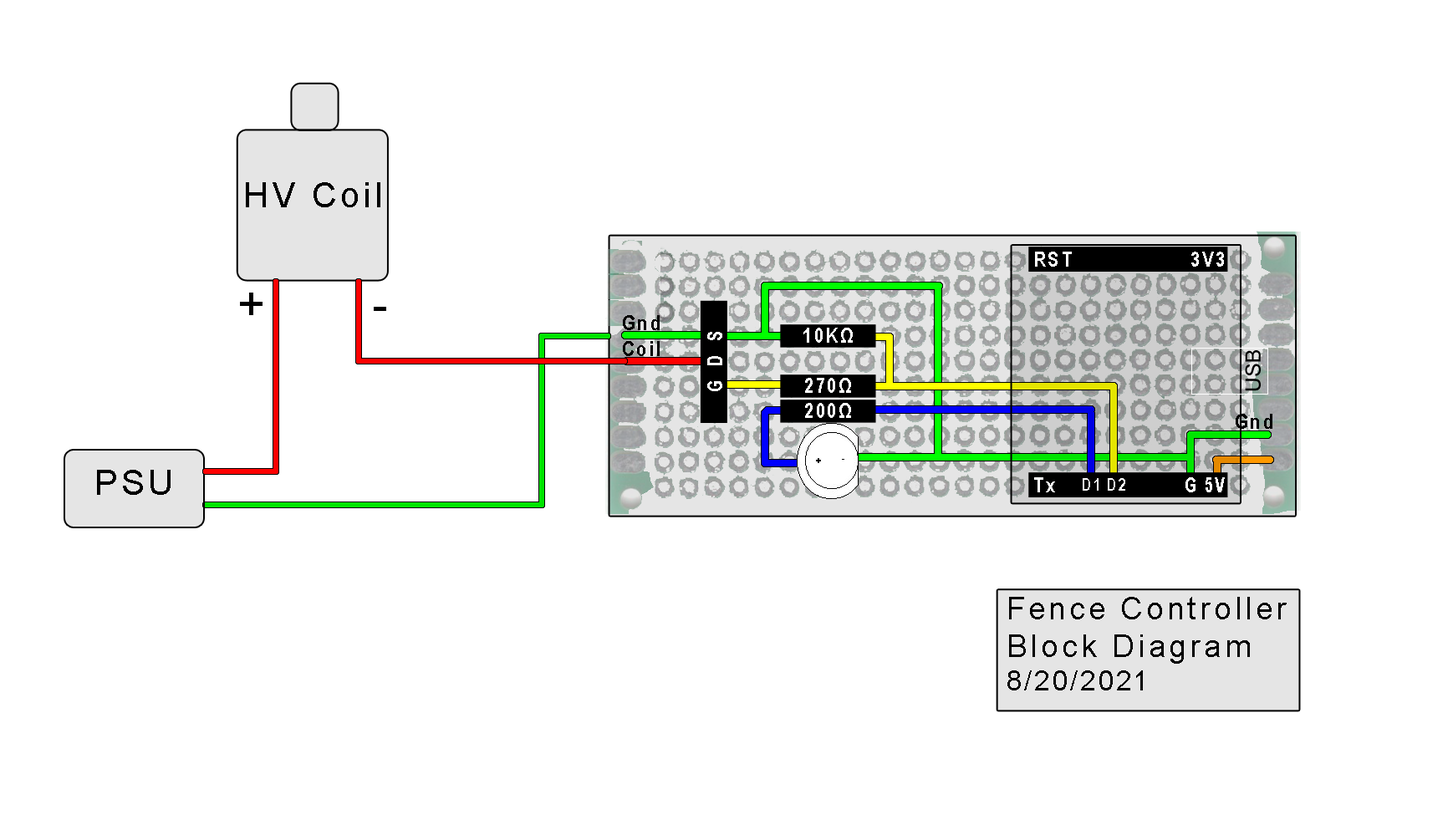
<style>
.page{position:relative;width:1453px;height:820px;background:#ffffff}
.page>*{position:absolute;margin:0}
.t1{font:34.8px "ArialMT";letter-spacing:0.1em;color:#000000}
.t2{font:20.9px "ArialNarrow-Bold";letter-spacing:0.1em;color:#ffffff}
.t3{font:48.8px "ArialMT";letter-spacing:0.1em;color:#000000}
.t4{font:20.9px "ArialNarrow-Bold";letter-spacing:0.1em;color:#000000}
.t5{font:20.9px "ArialNarrow-Bold";letter-spacing:0.1em;color:#ffffff;scale:0.87 1}
.t6{font:20.9px "ArialMT";color:#000000}
.t7{font:17.7px "ArialNarrow-Bold";letter-spacing:0.1em;color:#ffffff;scale:0.91 1}
.t8{font:20.9px "ArialNarrow-Bold";letter-spacing:0.1em;color:#ffffff;scale:0.89 1}
.t9{font:31.4px "ArialMT";letter-spacing:0.1em;color:#000000}
.t10{font:27.9px "ArialMT";letter-spacing:0.1em;color:#000000}
</style>
<div class="page">
<p class="t1" style="left:246px;top:182px;width:135px;height:25px">HV Coil</p>
<p class="t2" style="left:1035px;top:252px;width:37px;height:15px">RST</p>
<p class="t2" style="left:1192px;top:252px;width:32px;height:15px">3V3</p>
<p class="t3" style="left:240px;top:293px;width:23px;height:22px">+</p>
<p class="t4" style="left:623px;top:315px;width:37px;height:15px">Gnd</p>
<p class="t2" style="left:804px;top:328px;width:49px;height:15px">10KΩ</p>
<p class="t4" style="left:623px;top:341px;width:37px;height:15px">Coil</p>
<p class="t5" style="left:708px;top:332px;width:15px;height:59px;rotate:-90deg">G  D  S</p>
<p class="t6" style="left:1245px;top:350px;width:16px;height:41px;rotate:-90deg">USB</p>
<p class="t2" style="left:805px;top:378px;width:46px;height:15px">270Ω</p>
<p class="t2" style="left:805px;top:403px;width:46px;height:15px">200Ω</p>
<p class="t4" style="left:1236px;top:414px;width:37px;height:15px">Gnd</p>
<p class="t1" style="left:97px;top:470px;width:74px;height:25px">PSU</p>
<p class="t2" style="left:1034px;top:478px;width:21px;height:15px">Tx</p>
<p class="t7" style="left:1083px;top:478px;width:43px;height:13px">D1 D2</p>
<p class="t8" style="left:1186px;top:478px;width:39px;height:15px">G 5V</p>
<p class="t9" style="left:1008px;top:597px;width:279px;height:94px">Fence Controller<br>Block Diagram<br><span class="t10">8/20/2021</span></p>
</div>
